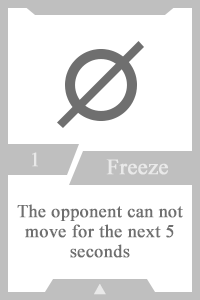
<style>
.page{position:relative;width:200px;height:300px;background:#ffffff}
.page>*{position:absolute;margin:0}
.t1{font:20px "TimesNewRomanPSMT";color:#e9e9e9;font-weight:bold}
.t2{font:22px "TimesNewRomanPSMT";color:#e9e9e9;font-weight:bold}
.t3{font:18px/20px "TimesNewRomanPSMT";color:#6f6f6f;font-weight:bold}
.t4{font:14px "AdobeHeitiStd-Regular";color:#e9e9e9;font-weight:bold}
</style>
<div class="page">
<p class="t1" style="left:32px;top:152px;width:6px;height:15px">1</p>
<p class="t2" style="left:106px;top:159px;width:62px;height:16px">Freeze</p>
<p class="t3" style="left:17px;top:204px;width:166px;height:54px;text-align:center">The opponent can not move for the next 5 seconds</p>
<p class="t4" style="left:94px;top:284px;width:12px;height:11px">▲</p>
</div>
